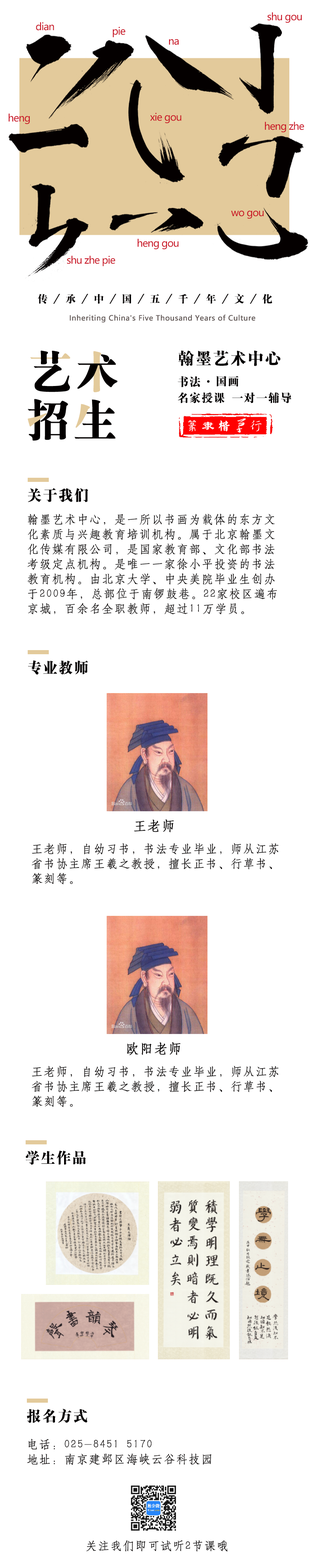
<style>
.page{position:relative;width:310px;height:1568px;background:#ffffff}
.page>*{position:absolute;margin:0}
.t1{font:9.9px "MicrosoftYaHeiUI";letter-spacing:-0.05em;color:#c91525}
.t2{font:10.4px "HYa9gj";color:#040606}
.t3{font:7.2px "MicrosoftYaHeiUI";letter-spacing:0.025em;color:#605654;font-weight:bold}
.t4{font:16.5px "HYa9gj";letter-spacing:0.05em;color:#040606}
.t5{font:11.6px "HYa9gj";letter-spacing:0.05em;color:#040606}
.t6{font:13.3px "DFNewChuan-W5-WINP-BF";letter-spacing:0.2em;color:#ffffff}
.t7{font:13.3px "HYf1gj";letter-spacing:0.2em;color:#ffffff}
.t8{font:13.3px "¾­µä·±Ã«¿¬ Regular";letter-spacing:0.2em;color:#ffffff}
.t9{font:13.3px "²ÝÌ´Õ«Ã«Ôó¶«×ÖÌå";letter-spacing:0.2em;color:#ffffff}
.t10{font:13.3px "¾­µä·±ÐÐÊé Regular";letter-spacing:0.2em;color:#ffffff}
.t11{font:14.9px "HYa9gj";letter-spacing:0.05em;color:#040606}
.t12{font:11.6px/14.9px "HYd1gj";letter-spacing:0.05em;color:#040606;font-weight:bold}
.t13{font:13.2px "HYd1gj";letter-spacing:0.05em;color:#030000;font-weight:bold}
.t14{font:11.6px "HYd1gj";letter-spacing:0.05em;color:#040606;font-weight:bold}
</style>
<div class="page">
<p class="t1" style="left:267px;top:12px;width:35px;height:11px">shu gou</p>
<p class="t1" style="left:36px;top:22px;width:18px;height:9px">dian</p>
<p class="t1" style="left:113px;top:27px;width:12px;height:10px">pie</p>
<p class="t1" style="left:169px;top:39px;width:10px;height:6px">na</p>
<p class="t1" style="left:9px;top:113px;width:21px;height:11px">heng</p>
<p class="t1" style="left:150px;top:113px;width:31px;height:10px">xie gou</p>
<p class="t1" style="left:265px;top:122px;width:39px;height:10px">heng zhe</p>
<p class="t1" style="left:231px;top:210px;width:33px;height:9px">wo gou</p>
<p class="t1" style="left:138px;top:238px;width:41px;height:11px">heng gou</p>
<p class="t1" style="left:67px;top:255px;width:48px;height:11px">shu zhe pie</p>
<p class="t2" style="left:38px;top:294px;width:234px;height:10px">传 / 承 / 中 / 国 / 五 / 千 / 年 / 文 / 化</p>
<p class="t3" style="left:70px;top:315px;width:185px;height:8px">Inheriting China's Five Thousand Years of Culture</p>
<p class="t4" style="left:178px;top:350px;width:103px;height:16px">翰墨艺术中心</p>
<p class="t5" style="left:178px;top:376px;width:22px;height:11px">书法</p>
<p class="t5" style="left:217px;top:376px;width:21px;height:11px">国画</p>
<p class="t5" style="left:178px;top:392px;width:47px;height:11px">名家授课</p>
<p class="t5" style="left:232px;top:392px;width:59px;height:11px">一对一辅导</p>
<p class="t6" style="left:188px;top:418px;width:74px;height:15px">篆<span class="t7">隶</span><span class="t8">楷</span><span class="t9">草</span><span class="t10">行</span></p>
<p class="t11" style="left:28px;top:488px;width:60px;height:14px">关于我们</p>
<p class="t12" style="left:27px;top:513px;width:250px;height:102px">翰墨艺术中心，是一所以书画为载体的东方文化素质与兴趣教育培训机构。属于北京翰墨文化传媒有限公司，是国家教育部、文化部书法考级定点机构。是唯一一家徐小平投资的书法教育机构。由北京大学、中央美院毕业生创办于2009年，总部位于南锣鼓巷。22家校区遍布京城，百余名全职教师，超过11万学员。</p>
<p class="t11" style="left:28px;top:660px;width:60px;height:14px">专业教师</p>
<p class="t13" style="left:134px;top:819px;width:40px;height:13px">王老师</p>
<p class="t12" style="left:32px;top:843px;width:247px;height:41px">王老师，自幼习书，书法专业毕业，师从江苏省书协主席王羲之教授，擅长正书、行草书、篆刻等。</p>
<p class="t13" style="left:127px;top:1042px;width:54px;height:13px">欧阳老师</p>
<p class="t12" style="left:32px;top:1065px;width:247px;height:42px">王老师，自幼习书，书法专业毕业，师从江苏省书协主席王羲之教授，擅长正书、行草书、篆刻等。</p>
<p class="t11" style="left:26px;top:1151px;width:60px;height:14px">学生作品</p>
<p class="t11" style="left:27px;top:1409px;width:60px;height:14px">报名方式</p>
<p class="t12" style="left:27px;top:1439px;width:185px;height:26px">电话：025-8451 5170<br>地址：南京建邺区海峡云谷科技园</p>
<p class="t14" style="left:86px;top:1540px;width:142px;height:12px">关注我们即可试听2节课哦</p>
</div>
